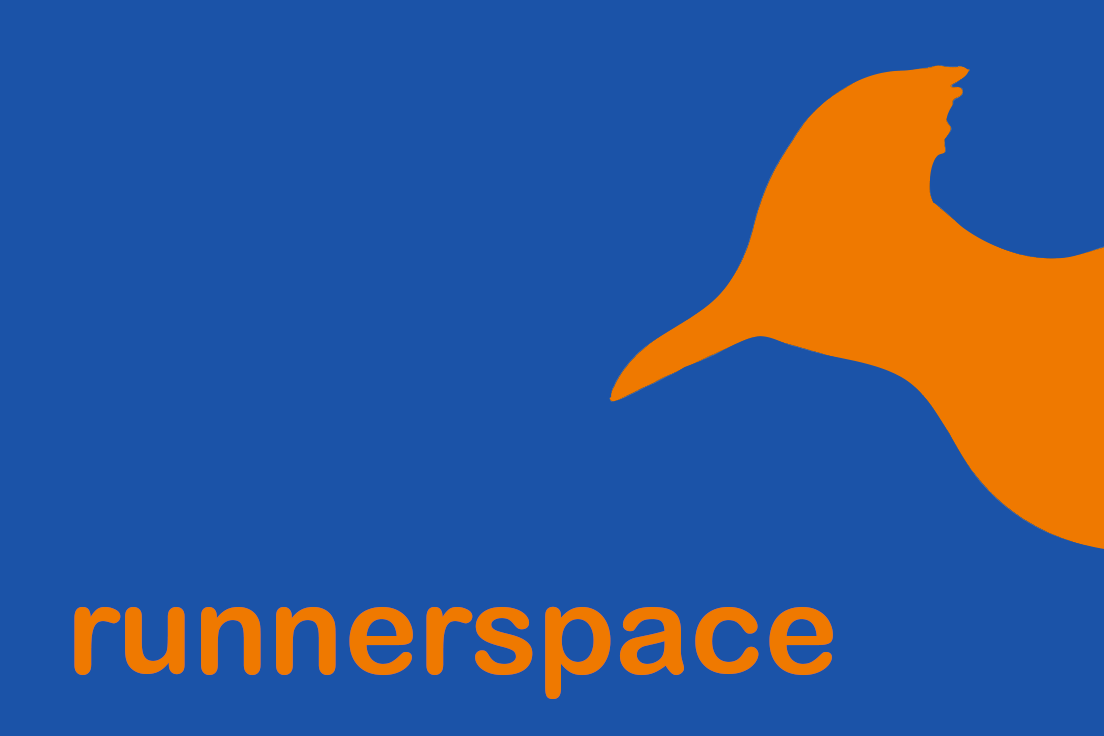
<style>
.page{position:relative;width:1104px;height:736px;background:#1b53a8}
.page>*{position:absolute;margin:0}
.t1{font:125px "ArialRoundedMTBold";color:#ef7900}
</style>
<div class="page">
<p class="t1" style="left:74px;top:606px;width:759px;height:93px">runnerspace</p>
</div>
